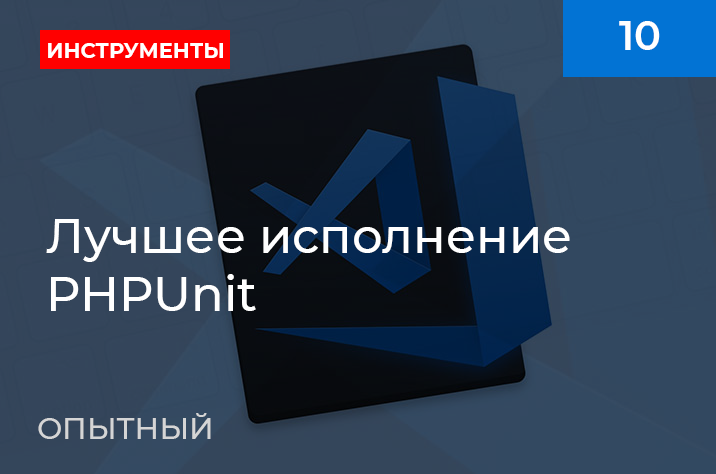
<style>
.page{position:relative;width:716px;height:474px}
.page>*{position:absolute;margin:0}
.t1{font:40px "Montserrat-SemiBold";color:#ffffff}
.t2{font:22px "Montserrat-Bold";color:#ffffff;scale:0.95 1}
.t3{font:48px "Montserrat-Medium";color:#ffffff}
.t4{font:30px "Montserrat-Medium";color:#d5d5d5}
</style>
<div class="page">
<p class="t1" style="left:619px;top:21px;width:41px;height:29px">10</p>
<p class="t2" style="left:48px;top:43px;width:175px;height:15px">ИНСТРУМЕНТЫ</p>
<p class="t3" style="left:46px;top:219px;width:524px;height:92px">Лучшее исполнение<br>PHPUnit</p>
<p class="t4" style="left:38px;top:413px;width:173px;height:26px">ОПЫТНЫЙ</p>
</div>
